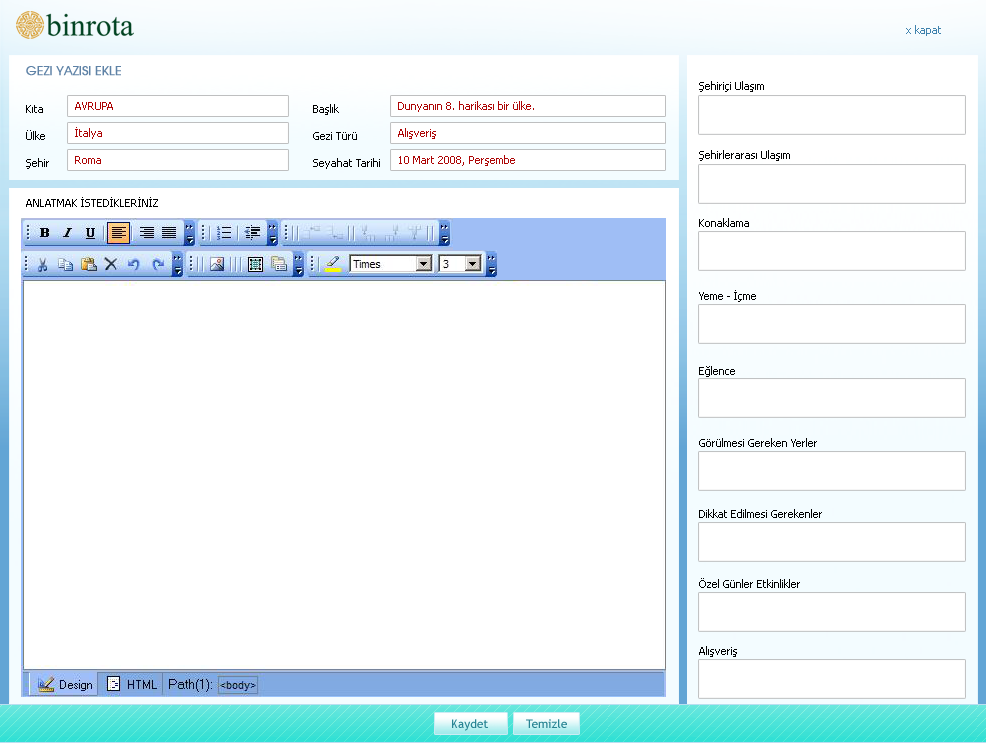
<style>
.page{position:relative;width:986px;height:743px;background:#ffffff}
.page>*{position:absolute;margin:0}
.t1{font:11px "Tahoma";color:#3f82ad}
.t2{font:12px "TRAvalonPlain";color:#5e82a6;font-weight:bold}
.t3{font:11px "Tahoma";color:#000000}
.t4{font:11px "Tahoma";color:#ad0505}
.t5{font:11px "Tahoma";color:#000000;text-transform:uppercase}
.t6{font:12px "TrebuchetMS";color:#288493}
</style>
<div class="page">
<p class="t1" style="left:906px;top:25px;width:35px;height:11px">x kapat</p>
<p class="t2" style="left:26px;top:66px;width:95px;height:10px">GEZI YAZISI EKLE</p>
<p class="t3" style="left:699px;top:81px;width:65px;height:11px">Şehiriçi Ulaşım</p>
<p class="t4" style="left:75px;top:102px;width:38px;height:8px">AVRUPA</p>
<p class="t4" style="left:398px;top:101px;width:136px;height:11px">Dunyanın 8. harikası bir ülke.</p>
<p class="t3" style="left:26px;top:105px;width:17px;height:8px">Kıta</p>
<p class="t3" style="left:313px;top:104px;width:26px;height:11px">Başlık</p>
<p class="t3" style="left:26px;top:130px;width:19px;height:10px">Ülke</p>
<p class="t4" style="left:75px;top:127px;width:27px;height:12px">İtalya</p>
<p class="t3" style="left:313px;top:132px;width:44px;height:8px">Gezi Türü</p>
<p class="t4" style="left:398px;top:128px;width:38px;height:11px">Alışveriş</p>
<p class="t3" style="left:699px;top:150px;width:91px;height:11px">Şehirlerarası Ulaşım</p>
<p class="t3" style="left:26px;top:158px;width:23px;height:11px">Şehir</p>
<p class="t4" style="left:75px;top:156px;width:26px;height:8px">Roma</p>
<p class="t3" style="left:313px;top:158px;width:67px;height:11px">Seyahat Tarihi</p>
<p class="t4" style="left:399px;top:155px;width:116px;height:11px">10 Mart 2008, Perşembe</p>
<p class="t5" style="left:26px;top:197px;width:132px;height:10px">Anlatmak İstedİklerİnİz</p>
<p class="t3" style="left:699px;top:218px;width:50px;height:9px">Konaklama</p>
<p class="t3" style="left:699px;top:290px;width:57px;height:12px">Yeme - İçme</p>
<p class="t3" style="left:699px;top:366px;width:36px;height:11px">Eğlence</p>
<p class="t3" style="left:699px;top:438px;width:118px;height:9px">Görülmesi Gereken Yerler</p>
<p class="t3" style="left:699px;top:509px;width:123px;height:9px">Dikkat Edilmesi Gerekenler</p>
<p class="t3" style="left:699px;top:578px;width:101px;height:10px">Özel Günler Etkinlikler</p>
<p class="t3" style="left:699px;top:646px;width:38px;height:11px">Alışveriş</p>
<p class="t6" style="left:452px;top:719px;width:36px;height:12px">Kaydet</p>
<p class="t6" style="left:526px;top:719px;width:41px;height:9px">Temizle</p>
</div>
